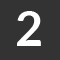
<style>
.page{position:relative;width:60px;height:60px;background:#333333}
.page>*{position:absolute;margin:0}
.t1{font:48px "Lato-Bold";color:#ffffff}
</style>
<div class="page">
<p class="t1" style="left:17px;top:11px;width:24px;height:35px">2</p>
</div>
